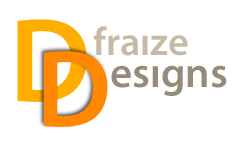
<style>
.page{position:relative;width:242px;height:143px;background:#ffffff}
.page>*{position:absolute;margin:0}
.t1{font:120px "MyriadPro-Semibold";color:#ffae00}
.t2{font:40px/32px "MyriadPro-Semibold";color:#c6baa6}
.t3{font:43px/32px "MyriadPro-Semibold";color:#968b7a}
.t4{font:110px "MyriadPro-Semibold";color:#ff8800}
</style>
<div class="page">
<p class="t1" style="left:17px;top:19px;width:70px;height:83px">D</p>
<p class="t2" style="left:93px;top:26px;width:134px;height:70px">fraize<br>  <span class="t3">esigns</span></p>
<p class="t4" style="left:43px;top:51px;width:65px;height:76px">D</p>
</div>
